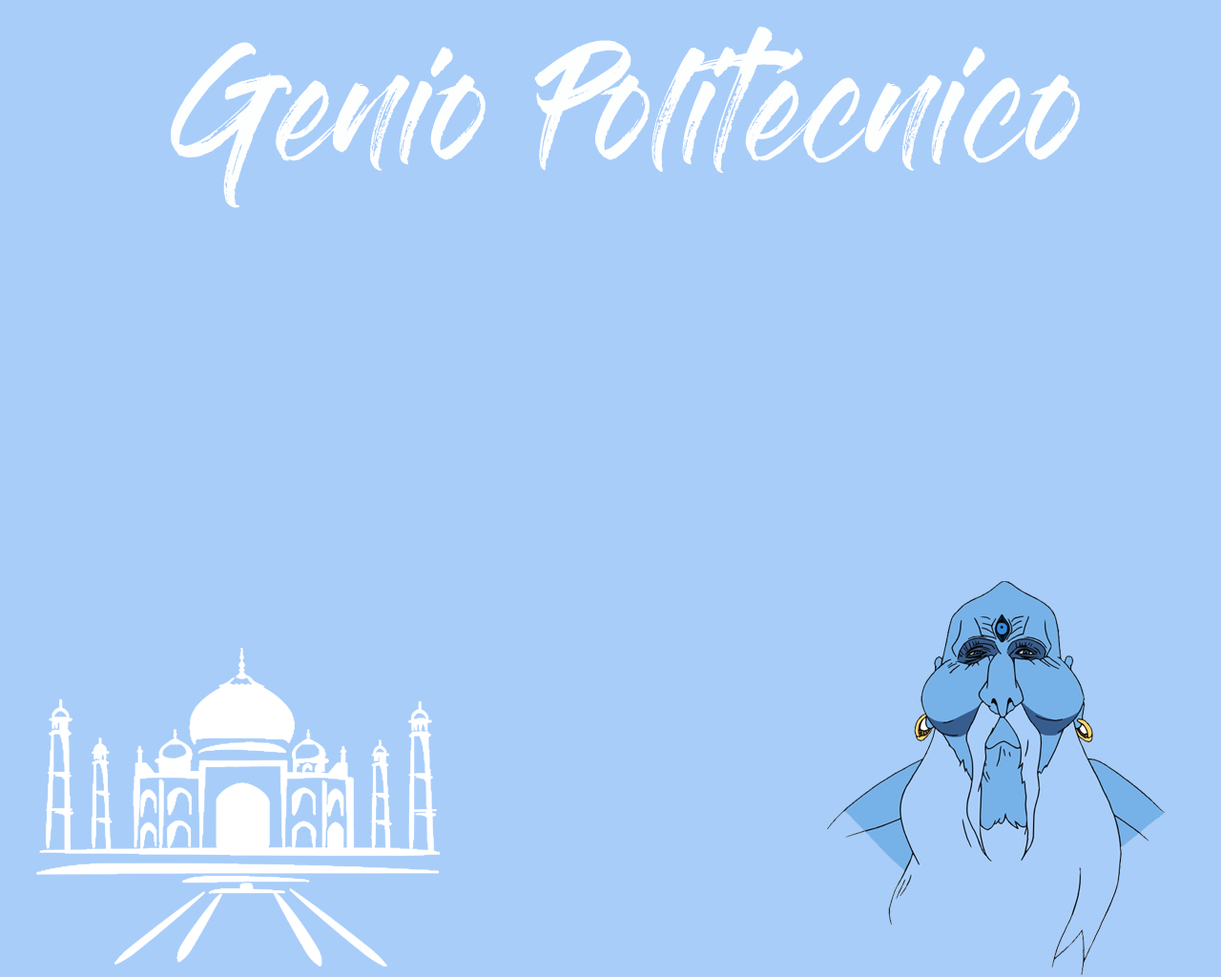
<style>
.page{position:relative;width:1221px;height:977px;background:#a8cdf9}
.page>*{position:absolute;margin:0}
.t1{font:114.5px "GlossAndBloom";color:#fdfefe}
</style>
<div class="page">
<p class="t1" style="left:171px;top:27px;width:909px;height:181px">Genio Politécnico</p>
</div>
